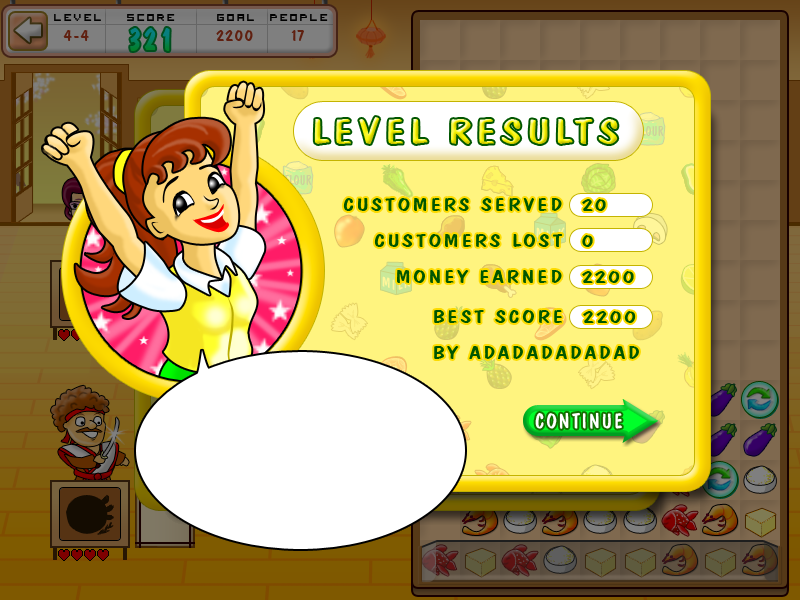
<style>
.page{position:relative;width:800px;height:600px}
.page>*{position:absolute;margin:0}
.t1{font:36.3px "DomCasualBT-Regular";letter-spacing:0.095em;scale:1.32 1}
.t2{font:19.2px/36px "DomCasualBT-Regular";letter-spacing:0.095em;color:#005600;scale:1.32 1}
</style>
<div class="page">
<p class="t1" style="left:314px;top:117px;width:304px;height:27px">LEVEL RESULTS</p>
<p class="t2" style="left:343px;top:198px;width:220px;height:85px;text-align:right">CUSTOMERS SERVED<br>CUSTOMERS LOST<br>MONEY EARNED</p>
<p class="t2" style="left:582px;top:199px;width:52px;height:84px">20<br>0<br>2200</p>
<p class="t2" style="left:434px;top:310px;width:205px;height:49px">BEST SCORE  2200<br>BY ADADADADADAD</p>
</div>
